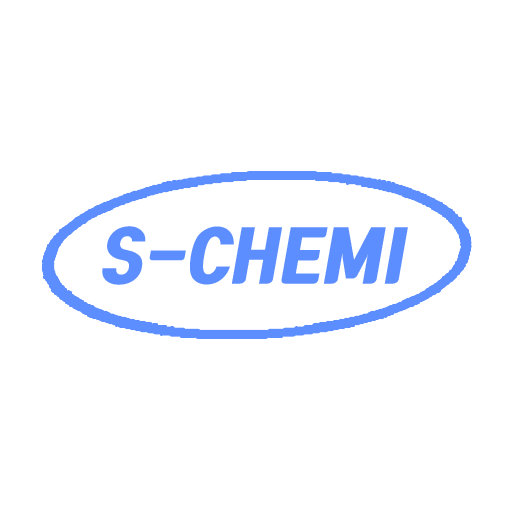
<style>
.page{position:relative;width:512px;height:512px;background:#ffffff}
.page>*{position:absolute;margin:0}
.t1{font:65px "TmonMonsoriBlack";color:#5c8eff;font-style:italic}
</style>
<div class="page">
<p class="t1" style="left:102px;top:226px;width:306px;height:59px">S-CHEMI</p>
</div>
